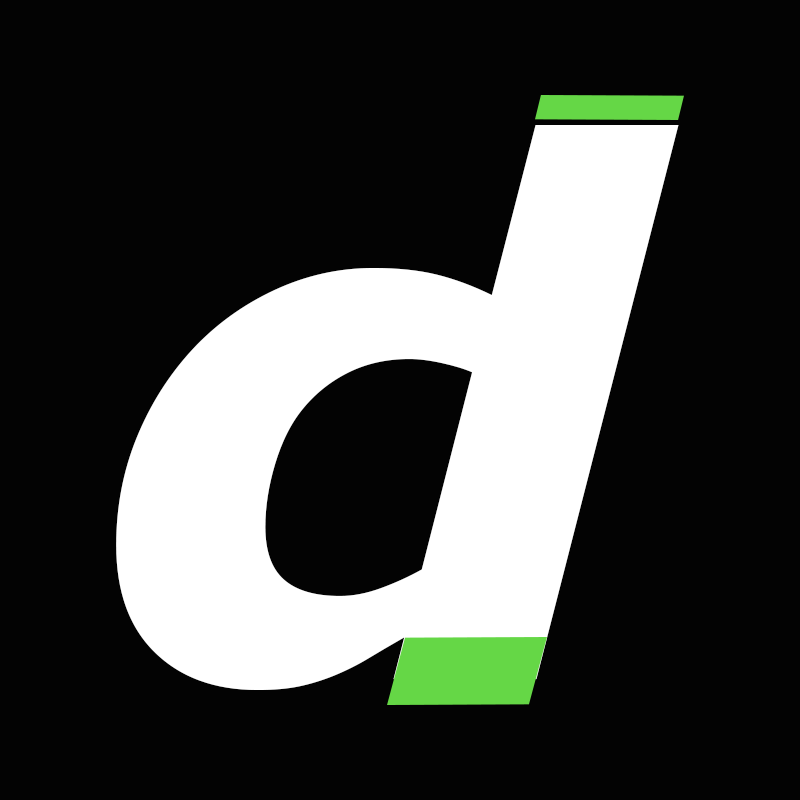
<style>
.page{position:relative;width:800px;height:800px;background:#030303}
.page>*{position:absolute;margin:0}
.t1{font:728.7px "Verdana-BoldItalic";color:#ffffff;scale:1.11 1}
</style>
<div class="page">
<p class="t1" style="left:116px;top:125px;width:563px;height:565px">d</p>
</div>
